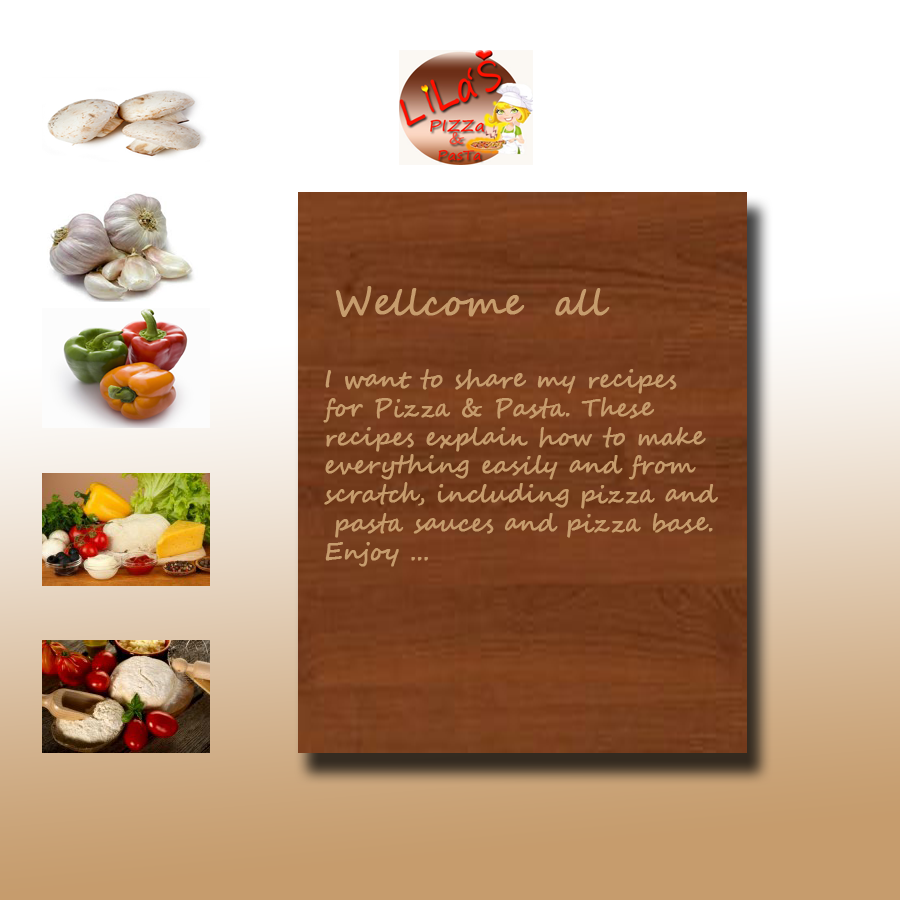
<style>
.page{position:relative;width:900px;height:900px;background:#ffffff}
.page>*{position:absolute;margin:0}
.t1{font:24px "SegoeScript";color:#c69c6d;font-weight:bold}
.t2{font:36px "SegoeScript";color:#c69c6d;font-weight:bold}
</style>
<div class="page">
<p class="t1" style="left:323px;top:286px;width:395px;height:281px"><span class="t2">Wellcome  all<br><br></span>I want to share my recipes <br>for Pizza &amp; Pasta. These <br>recipes explain how to make <br>everything easily and from <br>scratch, including pizza and<br> pasta sauces and pizza base.<br>Enjoy ...</p>
</div>
